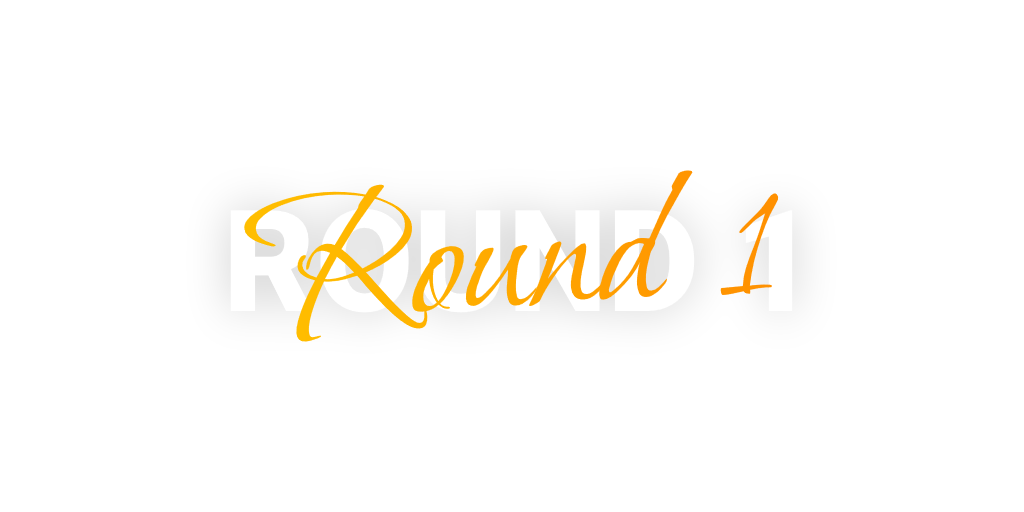
<style>
.page{position:relative;width:1024px;height:512px;background:#ffffff}
.page>*{position:absolute;margin:0}
.t1{font:201.7px "BonheurRoyale-Regular";color:#ffa800}
.t2{font:141.8px "Roboto-Black";color:#ffffff}
</style>
<div class="page">
<p class="t1" style="left:244px;top:170px;width:535px;height:172px;rotate:-4deg">Round 1</p>
<p class="t2" style="left:230px;top:208px;width:563px;height:105px">ROUND 1</p>
</div>
